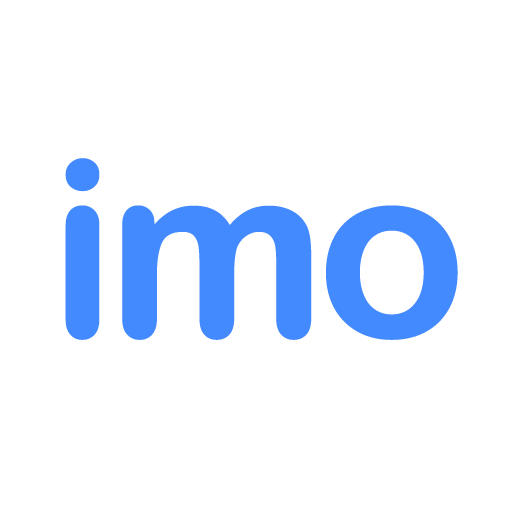
<style>
.page{position:relative;width:512px;height:512px;background:#ffffff}
.page>*{position:absolute;margin:0}
.t1{font:246.2px "ArialRoundedMTBold";letter-spacing:-0.06em;color:#448aff;font-weight:bold}
</style>
<div class="page">
<p class="t1" style="left:65px;top:158px;width:393px;height:182px">imo</p>
</div>
